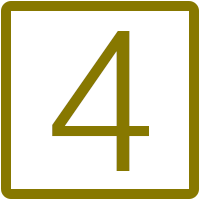
<style>
.page{position:relative;width:200px;height:200px;background:#ffffff}
.page>*{position:absolute;margin:0}
.t1{font:200px "Helvetica-Light";color:#877800}
</style>
<div class="page">
<p class="t1" style="left:52px;top:31px;width:97px;height:140px">4</p>
</div>
